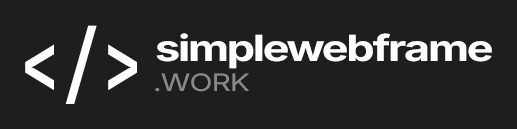
<style>
.page{position:relative;width:517px;height:129px;background:#1e1e1e}
.page>*{position:absolute;margin:0}
.t1{font:83.2px "JetBrainsMonoRoman-Bold";letter-spacing:0.05em;color:#ffffff;scale:0.77 1}
.t2{font:36px "Inter-Bold";letter-spacing:-0.05em;color:#ffffff;scale:1.25 1}
.t3{font:24px "Inter-Regular";letter-spacing:-0.03em;color:#8a8a8a;scale:1.25 1}
</style>
<div class="page">
<p class="t1" style="left:25px;top:25px;width:112px;height:79px">&lt;/&gt;</p>
<p class="t2" style="left:156px;top:33px;width:336px;height:36px">simplewebframe</p>
<p class="t3" style="left:155px;top:73px;width:94px;height:19px">.WORK</p>
</div>
